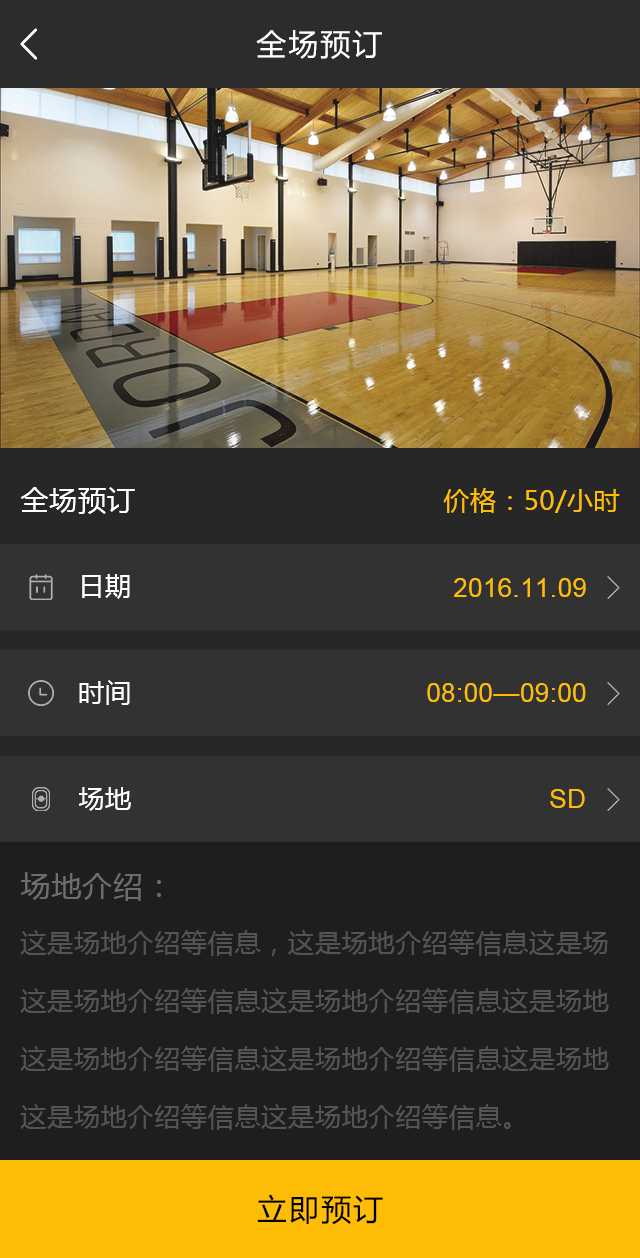
<style>
.page{position:relative;width:640px;height:1258px;background:#1e1e1e}
.page>*{position:absolute;margin:0}
.t1{font:30px "MicrosoftYaHei";letter-spacing:0.07em;color:#ffffff}
.t2{font:28px "MicrosoftYaHei";letter-spacing:0.03em;color:#ffffff}
.t3{font:26px "MicrosoftYaHei";letter-spacing:0.03em;color:#fdbd06}
.t4{font:26px "MicrosoftYaHei";letter-spacing:0.03em;color:#ffffff}
.t5{font:26px "ArialMT";letter-spacing:0.03em;color:#fdbd06}
.t6{font:30px "MicrosoftYaHei";letter-spacing:0.03em;color:#6d6d6d}
.t7{font:26px/58px "MicrosoftYaHei";letter-spacing:0.03em;color:#555454}
.t8{font:30px "MicrosoftYaHei";letter-spacing:0.07em;color:#000000}
</style>
<div class="page">
<p class="t1" style="left:256px;top:30px;width:126px;height:29px">全场预订</p>
<p class="t2" style="left:20px;top:487px;width:115px;height:27px">全场预订</p>
<p class="t3" style="left:443px;top:487px;width:177px;height:26px">价格：50/小时</p>
<p class="t4" style="left:82px;top:574px;width:48px;height:25px">日期</p>
<p class="t5" style="left:454px;top:578px;width:132px;height:19px">2016.11.09</p>
<p class="t4" style="left:79px;top:680px;width:51px;height:25px">时间</p>
<p class="t5" style="left:427px;top:683px;width:159px;height:19px">08:00—09:00</p>
<p class="t4" style="left:78px;top:787px;width:53px;height:24px">场地</p>
<p class="t5" style="left:550px;top:789px;width:35px;height:19px">SD</p>
<p class="t6" style="left:21px;top:872px;width:140px;height:29px">场地介绍：</p>
<p class="t7" style="left:20px;top:930px;width:589px;height:200px;text-align:justify">这是场地介绍等信息，这是场地介绍等信息这是场<br>这是场地介绍等信息这是场地介绍等信息这是场地<br>这是场地介绍等信息这是场地介绍等信息这是场地<br>这是场地介绍等信息这是场地介绍等信息。</p>
<p class="t8" style="left:257px;top:1194px;width:126px;height:31px">立即预订</p>
</div>
